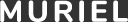
<style>
.page{position:relative;width:128px;height:22px;background:#333333}
.page>*{position:absolute;margin:0}
.t1{font:30px "Nunito-ExtraBold";letter-spacing:0.12em;color:#ffffff;text-transform:uppercase}
</style>
<div class="page">
<p class="t1" style="left:0px;top:0px;width:128px;height:22px">MURIEL</p>
</div>
